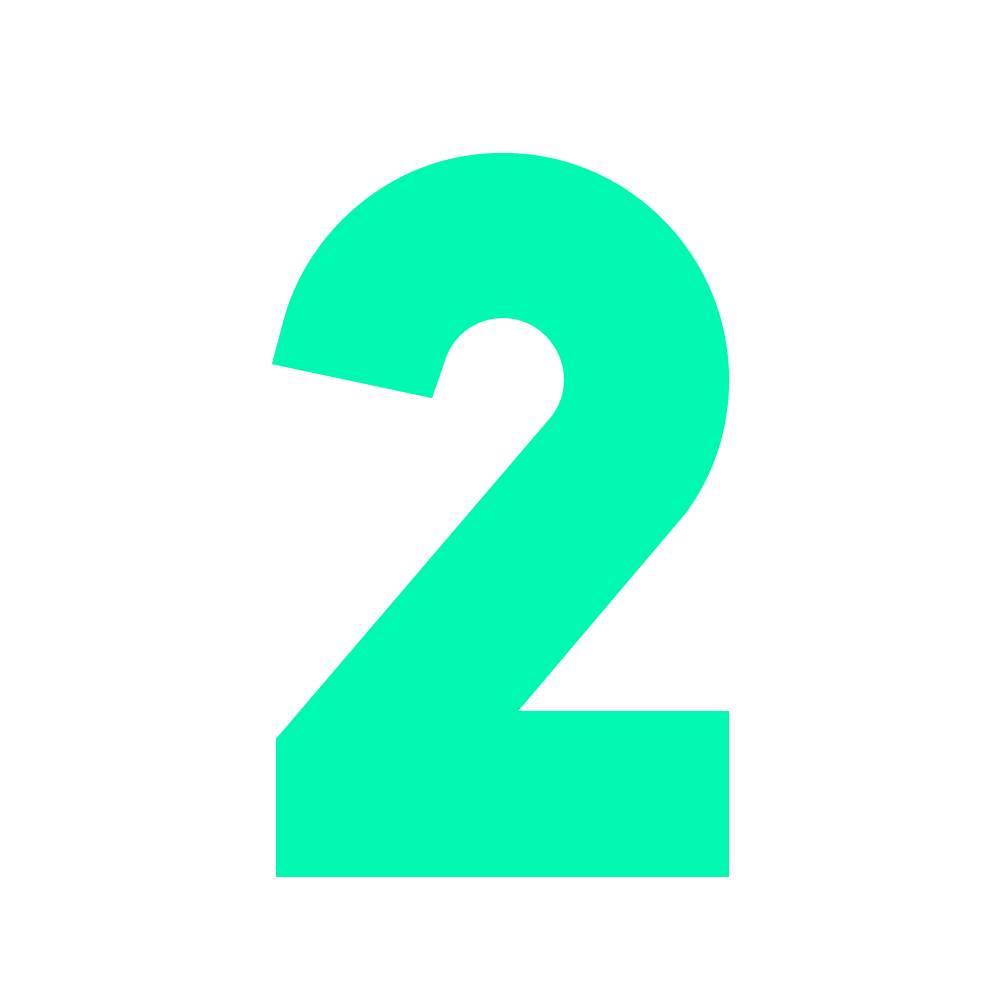
<style>
.page{position:relative;width:1000px;height:1000px;background:#ffffff}
.page>*{position:absolute;margin:0}
.t1{font:1000px "Biko-Black";color:#00f9b0}
</style>
<div class="page">
<p class="t1" style="left:272px;top:153px;width:457px;height:724px">2</p>
</div>
